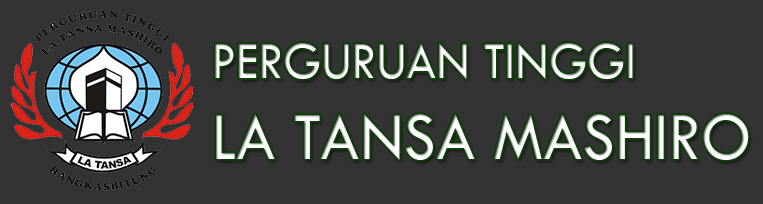
<style>
.page{position:relative;width:763px;height:204px;background:#333333}
.page>*{position:absolute;margin:0}
.t1{font:54.5px "TwCenMT-Regular";scale:0.91 1}
.t2{font:71.2px "TwCenMT-Regular";color:#ffffff;scale:0.91 1}
</style>
<div class="page">
<p class="t1" style="left:215px;top:43px;width:418px;height:36px">PERGURUAN TINGGI</p>
<p class="t2" style="left:216px;top:114px;width:533px;height:46px">LA TANSA MASHIRO</p>
</div>
